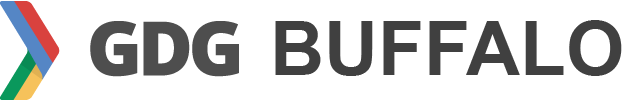
<style>
.page{position:relative;width:624px;height:100px;background:#ffffff}
.page>*{position:absolute;margin:0}
.t1{font:75px "Arial-BoldMT";color:#404040}
</style>
<div class="page">
<p class="t1" style="left:275px;top:20px;width:347px;height:56px">BUFFALO</p>
</div>
